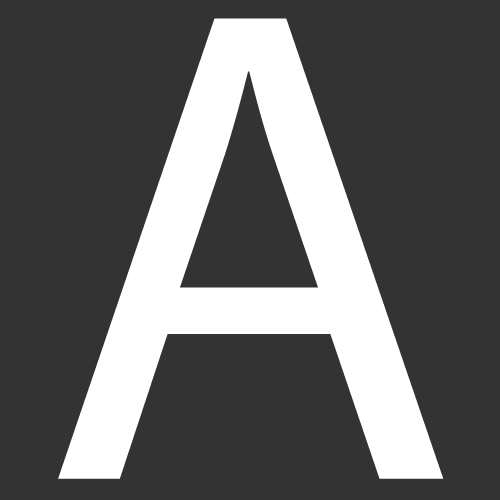
<style>
.page{position:relative;width:500px;height:500px;background:#333333}
.page>*{position:absolute;margin:0}
.t1{font:682.2px "MyriadPro-Regular";color:#ffffff}
</style>
<div class="page">
<p class="t1" style="left:58px;top:18px;width:386px;height:461px">A</p>
</div>
